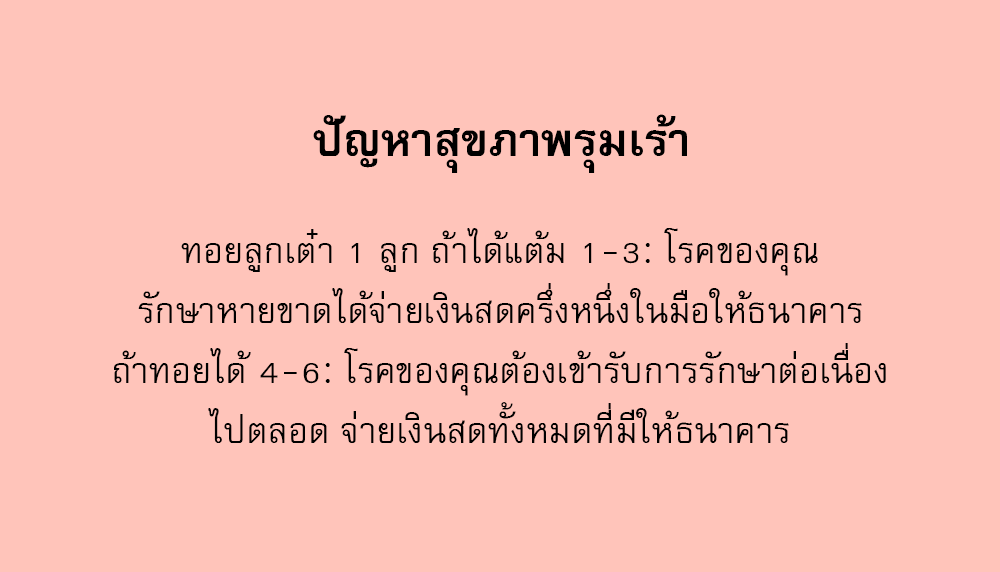
<style>
.page{position:relative;width:1000px;height:572px;background:#ffc4ba}
.page>*{position:absolute;margin:0}
.t1{font:64px "FreesiaUPCBold";color:#000000}
.t2{font:50px/60px "FreesiaUPC";color:#000000}
</style>
<div class="page">
<p class="t1" style="left:313px;top:114px;width:374px;height:59px">ปัญหาสุขภาพรุมเร้า</p>
<p class="t2" style="left:114px;top:228px;width:772px;height:215px;text-align:center">ทอยลูกเต๋า 1 ลูก ถ้าได้แต้ม 1-3: โรคของคุณ<br>รักษาหายขาดได้จ่ายเงินสดครึ่งหนึ่งในมือให้ธนาคาร<br>ถ้าทอยได้ 4-6: โรคของคุณต้องเข้ารับการรักษาต่อเนื่อง<br>ไปตลอด จ่ายเงินสดทั้งหมดที่มีให้ธนาคาร</p>
</div>
